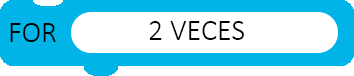
<style>
.page{position:relative;width:354px;height:76px;background:#ffffff}
.page>*{position:absolute;margin:0}
.t1{font:30px "Calibri-Light";color:#000000}
</style>
<div class="page">
<p class="t1" style="left:10px;top:23px;width:46px;height:19px">FOR</p>
<p class="t1" style="left:149px;top:21px;width:95px;height:19px">2 VECES</p>
</div>
